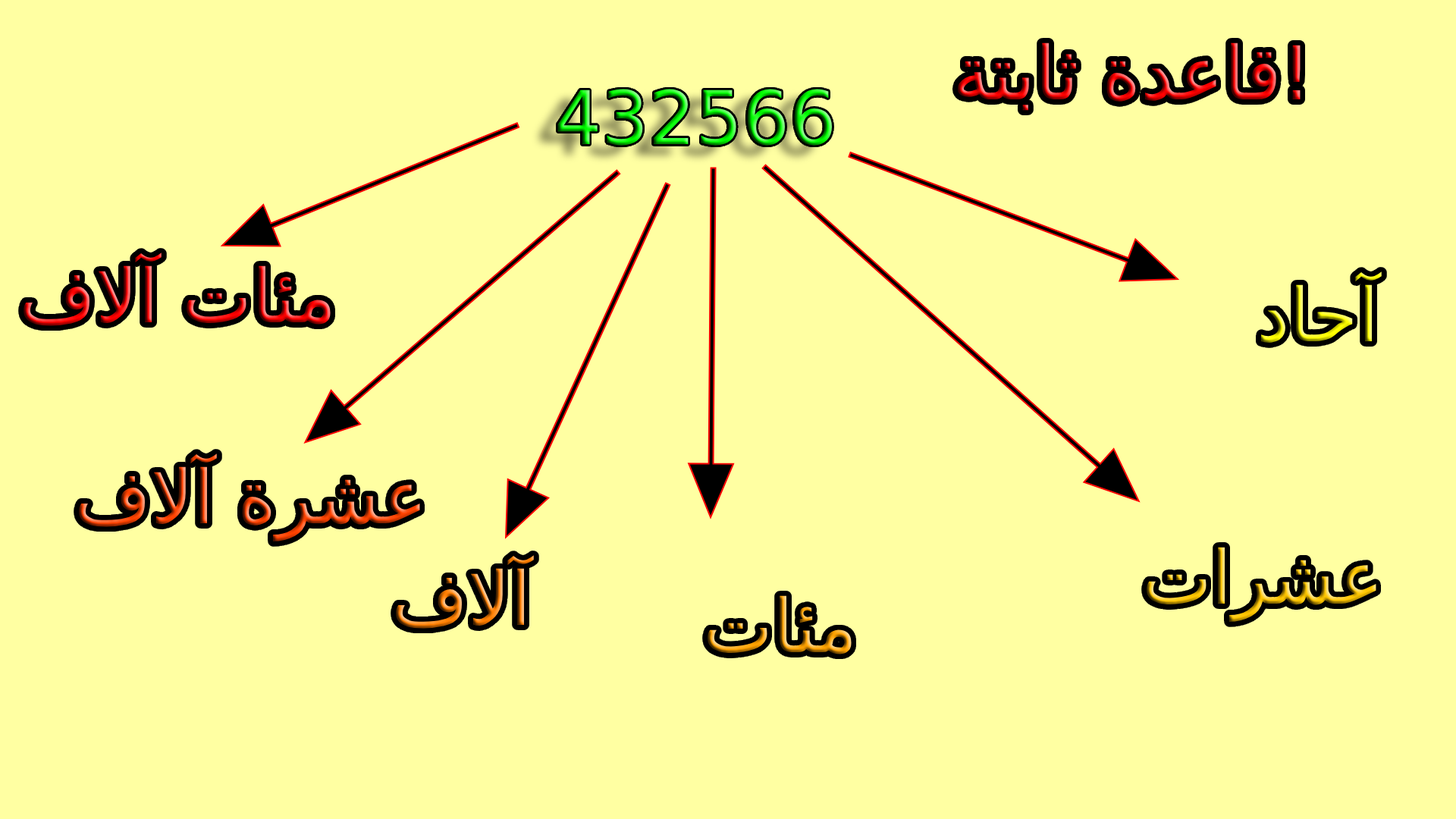
<style>
.page{position:relative;width:1456px;height:819px;background:#ffffa2}
.page>*{position:absolute;margin:0}
.t1{font:74px "DejaVuSans"}
</style>
<div class="page">
<p class="t1" style="left:957px;top:42px;width:344px;height:69px">قاعدة ثابتة!</p>
<p class="t1" style="left:557px;top:89px;width:275px;height:57px">432566</p>
<p class="t1" style="left:24px;top:253px;width:307px;height:73px">مئات آلاف</p>
<p class="t1" style="left:79px;top:453px;width:341px;height:88px">عشرة آلاف</p>
<p class="t1" style="left:1147px;top:547px;width:229px;height:75px">عشرات</p>
<p class="t1" style="left:708px;top:595px;width:144px;height:59px">مئات</p>
</div>
